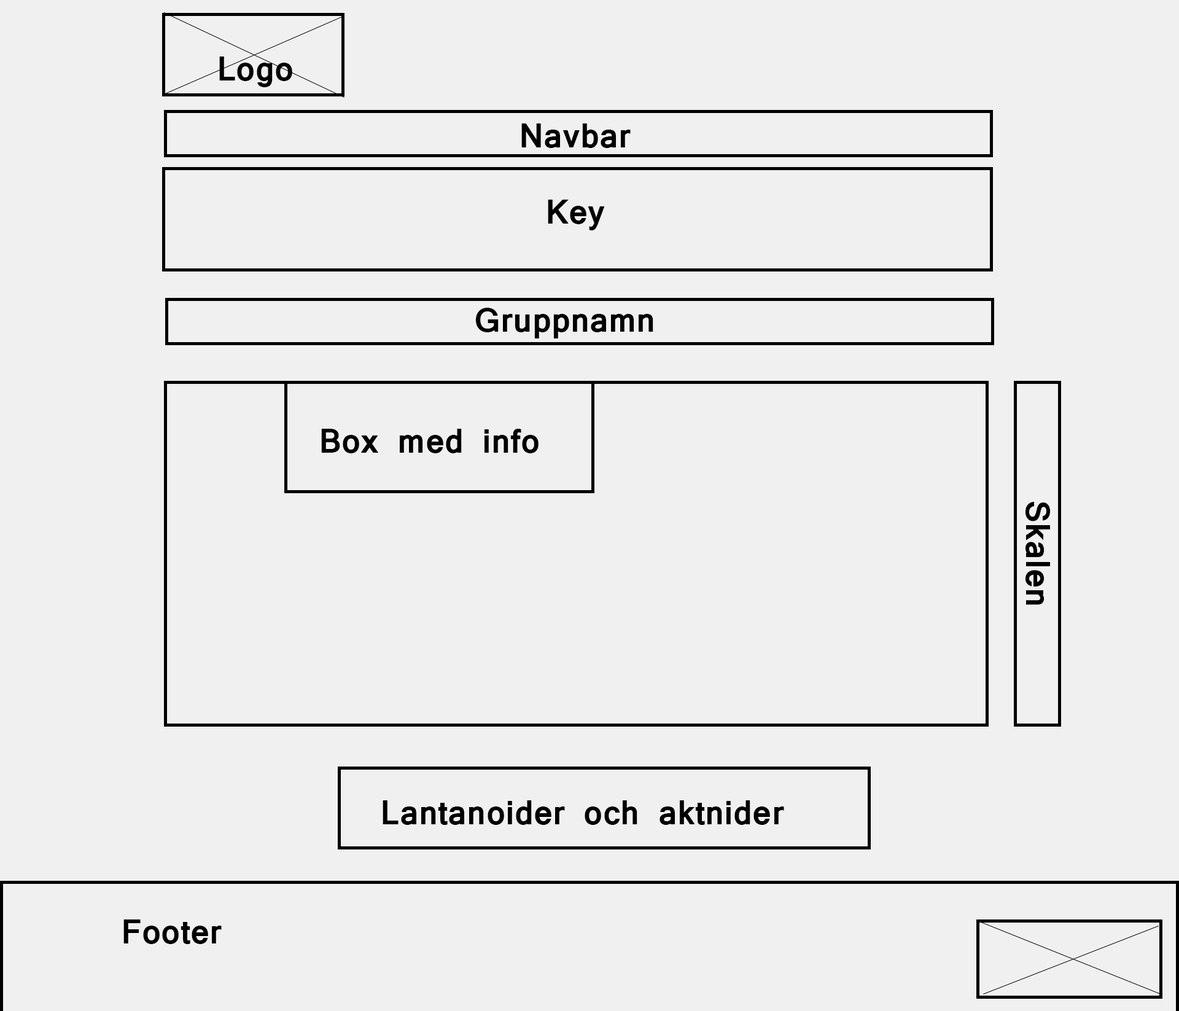
<style>
.page{position:relative;width:1179px;height:1011px;background:#f0f0f0}
.page>*{position:absolute;margin:0}
.t1{font:36.9px "Latha-Bold";color:#000000}
</style>
<div class="page">
<p class="t1" style="left:219px;top:57px;width:73px;height:30px">Logo</p>
<p class="t1" style="left:522px;top:123px;width:109px;height:25px">Navbar</p>
<p class="t1" style="left:548px;top:200px;width:57px;height:30px">Key</p>
<p class="t1" style="left:475px;top:308px;width:179px;height:30px">Gruppnamn</p>
<p class="t1" style="left:321px;top:429px;width:218px;height:24px">Box med info</p>
<p class="t1" style="left:383px;top:800px;width:401px;height:25px">Lantanoider och aktnider</p>
<p class="t1" style="left:123px;top:920px;width:99px;height:24px">Footer</p>
</div>
